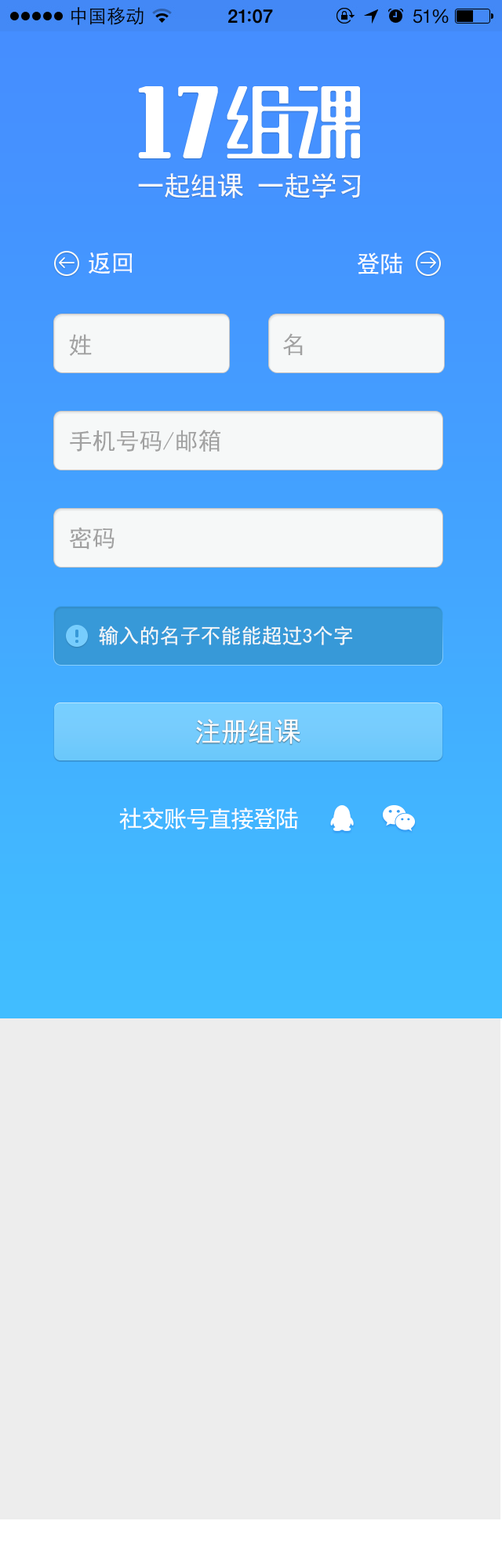
<style>
.page{position:relative;width:502px;height:1568px;background:#ededed}
.page>*{position:absolute;margin:0}
.t1{font:26.7px "SimHei";color:#fbfbfb}
.t2{font:23.5px "SimHei";color:#fefefe}
.t3{font:23.5px "SimHei";color:#a1a1a1}
.t4{font:20.4px "SimHei";color:#f6f8f8}
.t5{font:26.7px "SimHei";color:#fefefe}
.t6{font:23.5px "SimHei";letter-spacing:-0.05em;color:#fefefe}
</style>
<div class="page">
<p class="t1" style="left:138px;top:172px;width:223px;height:26px">一起组课 一起学习</p>
<p class="t2" style="left:89px;top:252px;width:43px;height:22px">返回</p>
<p class="t2" style="left:357px;top:252px;width:45px;height:22px">登陆</p>
<p class="t3" style="left:69px;top:334px;width:23px;height:22px">姓</p>
<p class="t3" style="left:283px;top:333px;width:20px;height:22px">名</p>
<p class="t3" style="left:70px;top:430px;width:150px;height:22px">手机号码/邮箱</p>
<p class="t3" style="left:69px;top:527px;width:45px;height:23px">密码</p>
<p class="t4" style="left:99px;top:626px;width:254px;height:19px">输入的名子不能能超过3个字</p>
<p class="t5" style="left:195px;top:719px;width:105px;height:25px">注册组课</p>
<p class="t6" style="left:119px;top:808px;width:179px;height:22px">社交账号直接登陆</p>
</div>
